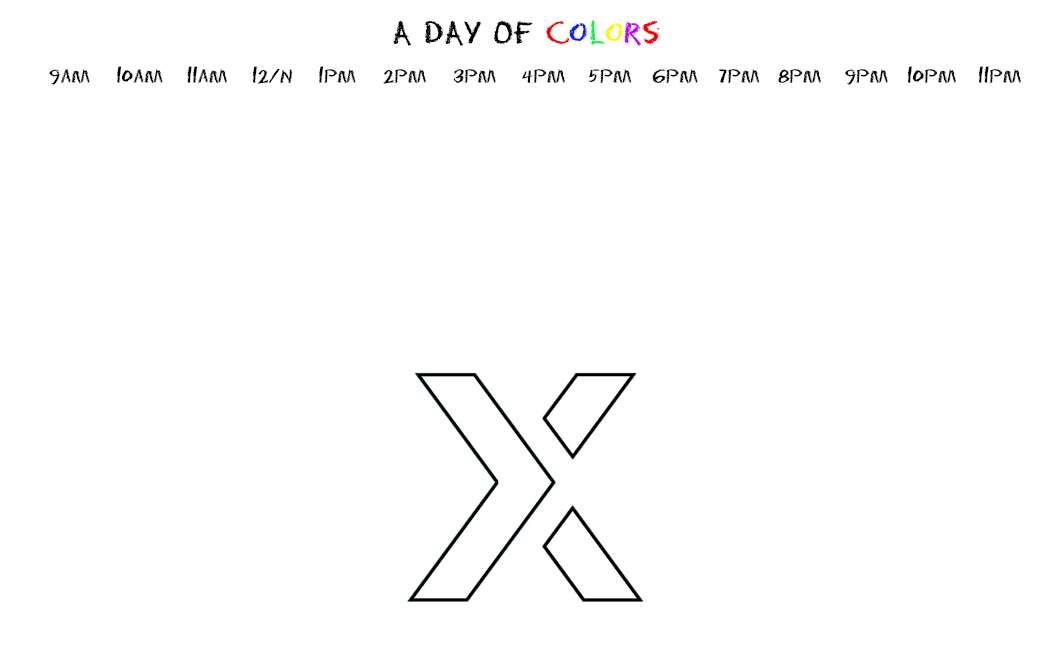
<style>
.page{position:relative;width:1050px;height:650px;background:#ffffff}
.page>*{position:absolute;margin:0}
.t1{font:29.2px "Eraser-Regular";color:#000000}
.t2{font:29.2px "Eraser-Regular";color:#fa0000}
.t3{font:29.2px "Eraser-Regular";color:#001dfa}
.t4{font:29.2px "Eraser-Regular";color:#00fa3b}
.t5{font:29.2px "Eraser-Regular";color:#faf700}
.t6{font:29.2px "Eraser-Regular";color:#c200fa}
.t7{font:17.2px "Eraser-Regular";color:#000000}
</style>
<div class="page">
<p class="t1" style="left:393px;top:20px;width:267px;height:27px">A DAY OF <span class="t2">c</span><span class="t3">o</span><span class="t4">l</span><span class="t5">o</span><span class="t6">r</span><span class="t2">s</span></p>
<p class="t7" style="left:49px;top:69px;width:41px;height:16px">9aM</p>
<p class="t7" style="left:117px;top:66px;width:46px;height:17px">10aM</p>
<p class="t7" style="left:187px;top:66px;width:40px;height:17px">11aM</p>
<p class="t7" style="left:253px;top:66px;width:40px;height:18px">12/N</p>
<p class="t7" style="left:319px;top:66px;width:37px;height:17px">1PM</p>
<p class="t7" style="left:383px;top:69px;width:43px;height:15px">2PM</p>
<p class="t7" style="left:453px;top:68px;width:43px;height:15px">3PM</p>
<p class="t7" style="left:522px;top:69px;width:43px;height:14px">4PM</p>
<p class="t7" style="left:588px;top:69px;width:44px;height:14px">5PM</p>
<p class="t7" style="left:652px;top:69px;width:46px;height:14px">6PM</p>
<p class="t7" style="left:718px;top:69px;width:42px;height:14px">7PM</p>
<p class="t7" style="left:778px;top:69px;width:43px;height:14px">8PM</p>
<p class="t7" style="left:845px;top:69px;width:43px;height:16px">9PM</p>
<p class="t7" style="left:908px;top:66px;width:48px;height:17px">10PM</p>
<p class="t7" style="left:979px;top:66px;width:42px;height:17px">11PM</p>
</div>
